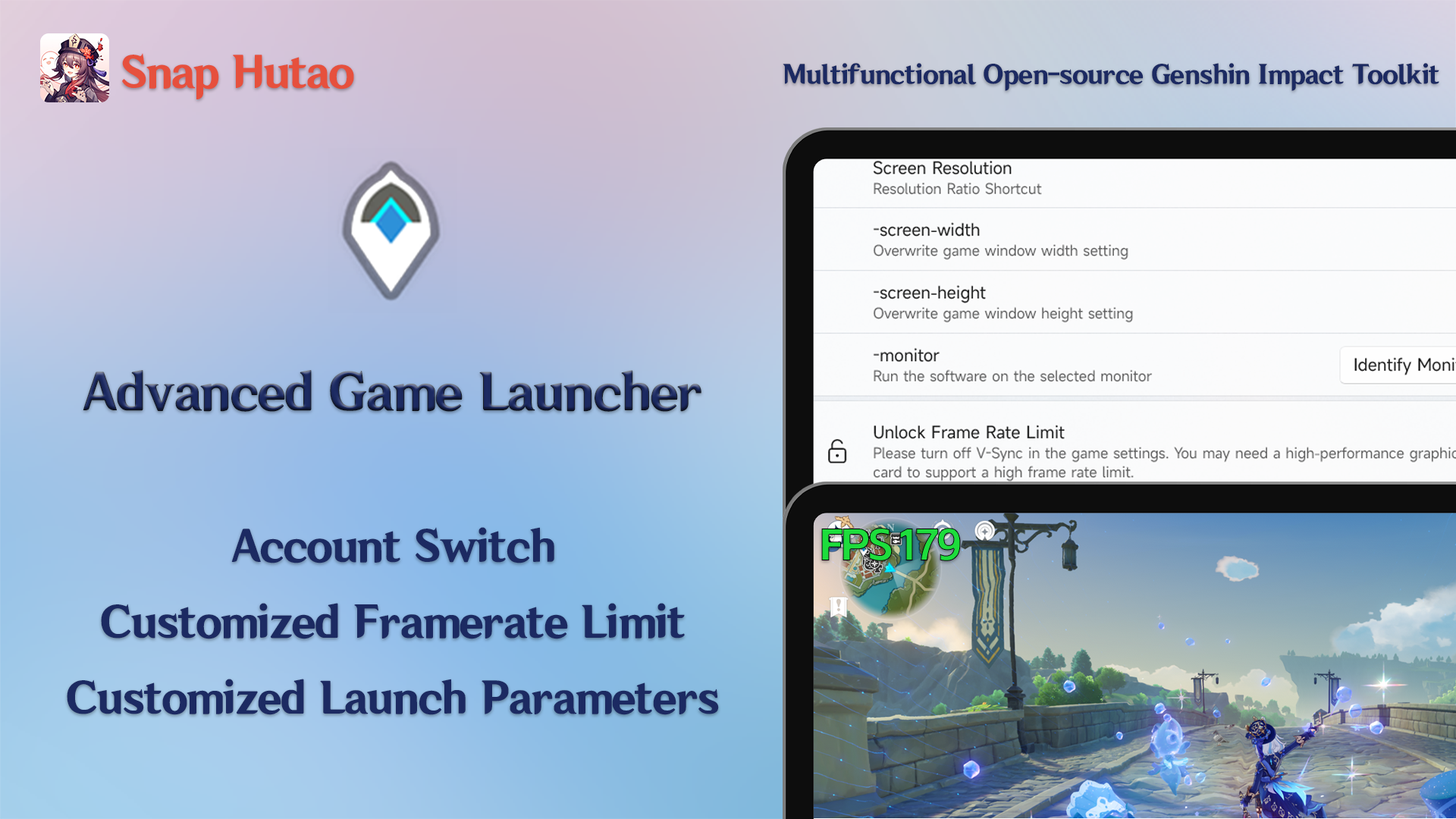
<style>
.page{position:relative;width:1456px;height:819px}
.page>*{position:absolute;margin:0}
.t1{font:45.5px "HYWenHei-85W";letter-spacing:-0.01em;color:#e6503d}
.t2{font:27.3px "HYWenHei-85W";color:#1c2a62}
.t3{font:53.1px "HYWenHei-85W"}
.t4{font:45.5px "HYWenHei-85W";color:#1c2a62}
.t5{font:45.5px "AlimamaShuHeiTi-Bold";letter-spacing:-0.075em;color:#1ddd3c}
</style>
<div class="page">
<p class="t1" style="left:122px;top:53px;width:232px;height:46px">Snap Hutao</p>
<p class="t2" style="left:783px;top:63px;width:656px;height:28px">Multifunctional Open-source Genshin Impact Toolkit</p>
<p class="t3" style="left:83px;top:370px;width:618px;height:42px">Advanced Game Launcher</p>
<p class="t4" style="left:231px;top:527px;width:323px;height:36px">Account Switch</p>
<p class="t5" style="left:821px;top:528px;width:140px;height:33px">FPS 179</p>
<p class="t4" style="left:101px;top:603px;width:584px;height:36px">Customized Framerate Limit</p>
<p class="t4" style="left:67px;top:679px;width:652px;height:36px">Customized Launch Parameters</p>
</div>
